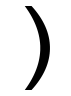
<style>
.page{position:relative;width:71px;height:96px;background:#ffffff}
.page>*{position:absolute;margin:0}
.t1{font:89.4px "MicrosoftSansSerif";color:#010101;scale:1.19 1}
</style>
<div class="page">
<p class="t1" style="left:24px;top:6px;width:26px;height:84px">)</p>
</div>
